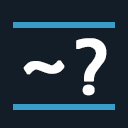
<style>
.page{position:relative;width:128px;height:128px;background:#131d27}
.page>*{position:absolute;margin:0}
.t1{font:72px "NanumGothicBold";color:#ffffff;font-weight:bold;scale:1.05 1}
</style>
<div class="page">
<p class="t1" style="left:23px;top:38px;width:84px;height:58px">~?</p>
</div>
